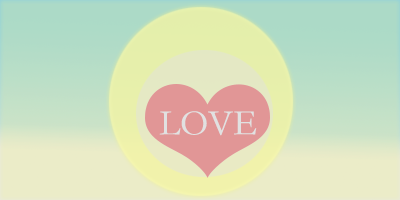
<style>
.page{position:relative;width:400px;height:200px}
.page>*{position:absolute;margin:0}
.t1{font:36px "STSong";color:#e1e1e1}
</style>
<div class="page">
<p class="t1" style="left:159px;top:111px;width:98px;height:25px">LOVE</p>
</div>
